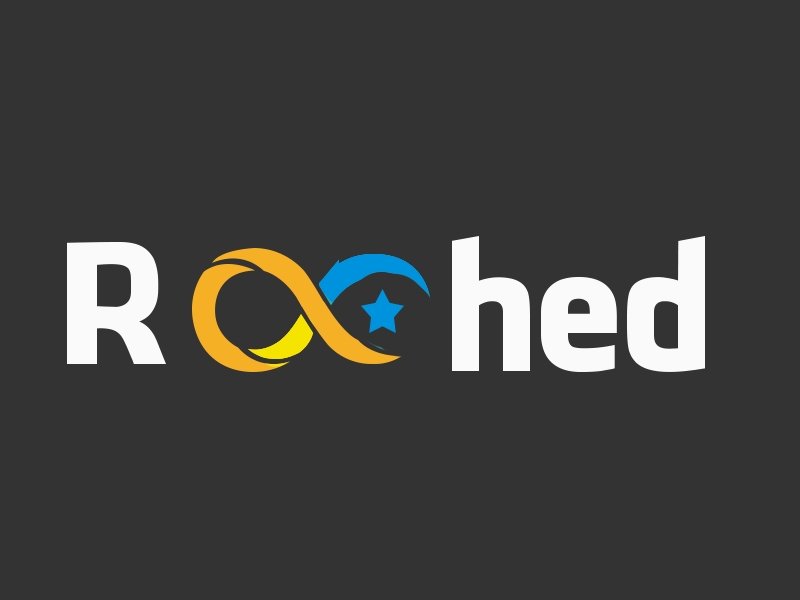
<style>
.page{position:relative;width:800px;height:600px;background:#333333}
.page>*{position:absolute;margin:0}
.t1{font:161.7px "FacebookLetterFaces";color:#fafafa}
.t2{font:173.1px "FacebookLetterFaces";color:#fafafa;scale:0.94 1}
</style>
<div class="page">
<p class="t1" style="left:67px;top:242px;width:99px;height:122px">R</p>
<p class="t2" style="left:452px;top:236px;width:253px;height:136px">hed</p>
</div>
